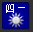
<style>
.page{position:relative;width:33px;height:32px;background:#000090}
.page>*{position:absolute;margin:0}
.t1{font:10.4px "SimSun";color:#ffffff}
</style>
<div class="page">
<p class="t1" style="left:6px;top:4px;width:19px;height:9px">四一</p>
</div>
